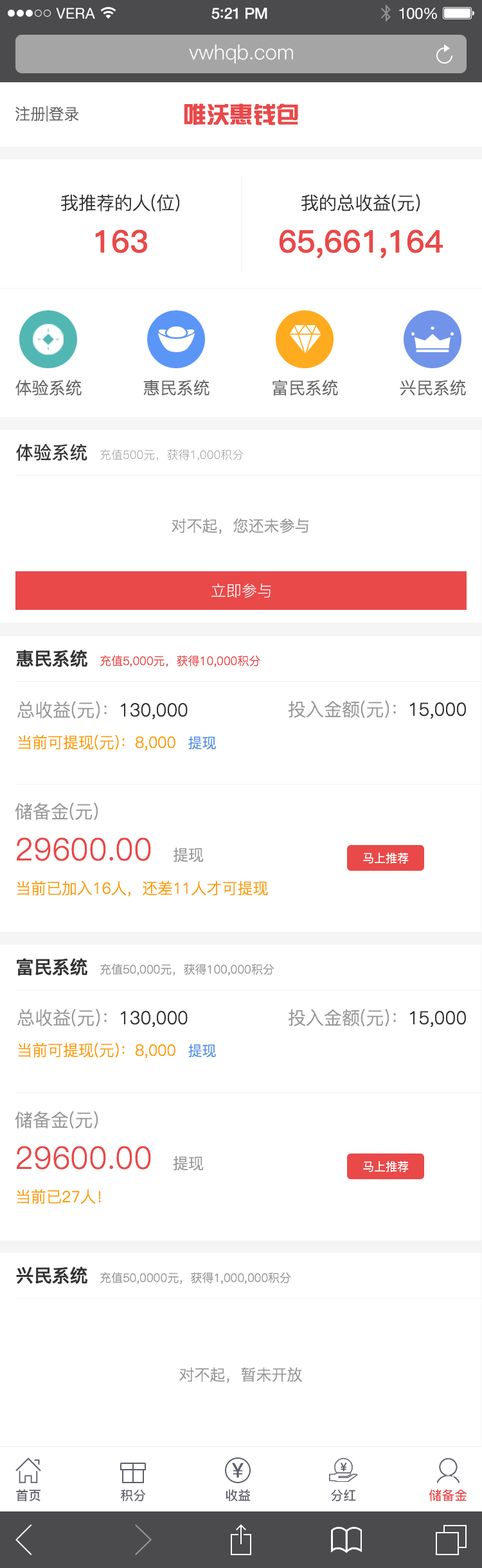
<style>
.page{position:relative;width:482px;height:1568px;background:#ffffff}
.page>*{position:absolute;margin:0}
.t1{font:14.8px "HelveticaNeue";letter-spacing:0.02em;color:#ffffff}
.t2{font:15.4px "HelveticaNeue-Medium";letter-spacing:-0.02em;color:#ffffff}
.t3{font:16.7px "Avenir-Medium";letter-spacing:-0.02em;color:#ffffff}
.t4{font:15.4px "HelveticaNeue";letter-spacing:-0.02em;color:#ffffff}
.t5{font:20.6px "PingFang-SC-Regular";color:#fefefe}
.t6{font:15.4px "PingFang-SC-Regular";color:#666666}
.t7{font:23.1px "FZZYJW--GB1-0";color:#e94949}
.t8{font:18px "PingFang-SC-Regular";color:#333333}
.t9{font:30.8px "PingFang-SC-Bold";color:#e94949}
.t10{font:16.7px "PingFang-SC-Regular";color:#666666}
.t11{font:11.6px "PingFang-SC-Regular";color:#999999}
.t12{font:18px "PingFang-SC-Bold";color:#333333}
.t13{font:15.4px "PingFang-SC-Regular";color:#999999}
.t14{font:15.4px "PingFang-SC-Regular";color:#ffffff}
.t15{font:11.6px "PingFang-SC-Regular";color:#e94949}
.t16{font:15.4px "PingFang-SC-Regular";color:#fca000}
.t17{font:18px "PingFang-SC-Regular";color:#999999}
.t18{font:14.1px "PingFang-SC-Regular";color:#4d90e7}
.t19{font:30.8px "PingFang-SC-Regular";color:#e94949}
.t20{font:11.6px "PingFang-SC-Regular";color:#ffffff}
.t21{font:20.6px "PingFang-SC-Bold";color:#5d5f6a}
.t22{font:12.9px "PingFang-SC-Bold";color:#5d5f6a}
.t23{font:12.9px "PingFang-SC-Bold";color:#e94949}
</style>
<div class="page">
<p class="t1" style="left:56px;top:8px;width:39px;height:11px">VERA</p>
<p class="t2" style="left:211px;top:8px;width:56px;height:11px">5<span class="t3">:</span>21 PM</p>
<p class="t4" style="left:399px;top:8px;width:38px;height:11px">100%</p>
<p class="t5" style="left:189px;top:44px;width:104px;height:20px">vwhqb.com</p>
<p class="t6" style="left:15px;top:105px;width:64px;height:17px">注册|登录</p>
<p class="t7" style="left:184px;top:103px;width:114px;height:22px">唯沃惠钱包</p>
<p class="t8" style="left:61px;top:194px;width:119px;height:59px;text-align:center">我推荐的人(位)<br><span class="t9">163</span></p>
<p class="t9" style="left:279px;top:194px;width:164px;height:64px;text-align:center"><span class="t8">我的总收益(元)<br></span>65,661,164</p>
<p class="t10" style="left:15px;top:380px;width:67px;height:16px">体验系统</p>
<p class="t10" style="left:143px;top:380px;width:66px;height:16px">惠民系统</p>
<p class="t10" style="left:272px;top:380px;width:66px;height:16px">富民系统</p>
<p class="t10" style="left:400px;top:380px;width:66px;height:16px">兴民系统</p>
<p class="t11" style="left:16px;top:443px;width:228px;height:18px"><span class="t12">体验系统  </span>充值500元，获得1,000积分</p>
<p class="t13" style="left:172px;top:518px;width:137px;height:16px">对不起，您还未参与</p>
<p class="t14" style="left:211px;top:584px;width:60px;height:14px">立即参与</p>
<p class="t15" style="left:16px;top:650px;width:244px;height:17px"><span class="t12">惠民系统  </span>充值5,000元，获得10,000积分</p>
<p class="t16" style="left:17px;top:701px;width:199px;height:50px"><span class="t17">总收益(元)：</span><span class="t8">130,000<br></span>当前可提现(元)：8,000  <span class="t18">提现</span></p>
<p class="t17" style="left:288px;top:700px;width:179px;height:19px">投入金额(元)：<span class="t8">15,000</span></p>
<p class="t19" style="left:15px;top:803px;width:189px;height:59px"><span class="t17">储备金(元)<br></span>29600.00  <span class="t13">提现</span></p>
<p class="t20" style="left:363px;top:852px;width:46px;height:12px">马上推荐</p>
<p class="t16" style="left:17px;top:880px;width:251px;height:16px">当前已加入16人，还差11人才可提现</p>
<p class="t11" style="left:17px;top:958px;width:257px;height:18px"><span class="t12">富民系统  </span>充值50,000元，获得100,000积分</p>
<p class="t16" style="left:17px;top:1009px;width:199px;height:49px"><span class="t17">总收益(元)：</span><span class="t8">130,000<br></span>当前可提现(元)：8,000  <span class="t18">提现</span></p>
<p class="t17" style="left:288px;top:1009px;width:179px;height:19px">投入金额(元)：<span class="t8">15,000</span></p>
<p class="t19" style="left:15px;top:1111px;width:189px;height:60px"><span class="t17">储备金(元)<br></span>29600.00  <span class="t13">提现</span></p>
<p class="t20" style="left:363px;top:1161px;width:46px;height:11px">马上推荐</p>
<p class="t16" style="left:17px;top:1189px;width:84px;height:15px">当前已27人！</p>
<p class="t11" style="left:16px;top:1267px;width:275px;height:17px"><span class="t12">兴民系统  </span>充值50,0000元，获得1,000,000积分</p>
<p class="t13" style="left:179px;top:1367px;width:123px;height:16px">对不起，暂未开放</p>
<p class="t21" style="left:232px;top:1463px;width:12px;height:15px">￥</p>
<p class="t22" style="left:16px;top:1489px;width:24px;height:12px">首页</p>
<p class="t22" style="left:121px;top:1489px;width:25px;height:12px">积分</p>
<p class="t22" style="left:226px;top:1489px;width:25px;height:12px">收益</p>
<p class="t22" style="left:331px;top:1489px;width:25px;height:12px">分红</p>
<p class="t23" style="left:429px;top:1489px;width:38px;height:12px">储备金</p>
</div>
